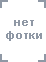
<style>
.page{position:relative;width:46px;height:62px;background:#ffffff}
.page>*{position:absolute;margin:0}
.t1{font:11px "Arial-BoldMT";letter-spacing:0.05em;color:#8f98a5}
</style>
<div class="page">
<p class="t1" style="left:6px;top:20px;width:36px;height:21px;text-align:center">нет <br>фотки</p>
</div>
